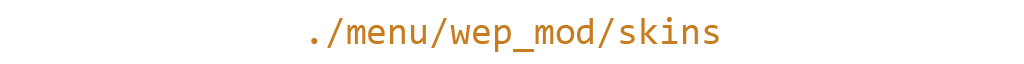
<style>
.page{position:relative;width:1024px;height:64px;background:#ffffff}
.page>*{position:absolute;margin:0}
.t1{font:38px "Consolas";color:#c87c20}
</style>
<div class="page">
<p class="t1" style="left:311px;top:17px;width:408px;height:35px">./menu/wep_mod/skins</p>
</div>
